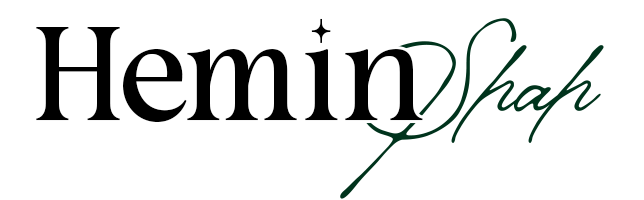
<style>
.page{position:relative;width:644px;height:200px;background:#ffffff}
.page>*{position:absolute;margin:0}
.t1{font:133.2px "MalibuSunday-Serif";color:#000000}
.t2{font:193.6px "ManchesterSignature";color:#00331c}
</style>
<div class="page">
<p class="t1" style="left:36px;top:18px;width:387px;height:104px">Hemin</p>
<p class="t2" style="left:340px;top:18px;width:264px;height:181px">Shah</p>
</div>
